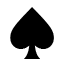
<style>
.page{position:relative;width:64px;height:64px;background:#ffffff}
.page>*{position:absolute;margin:0}
.t1{font:60px "Meiryo";color:#000000}
</style>
<div class="page">
<p class="t1" style="left:10px;top:7px;width:44px;height:52px">♠</p>
</div>
